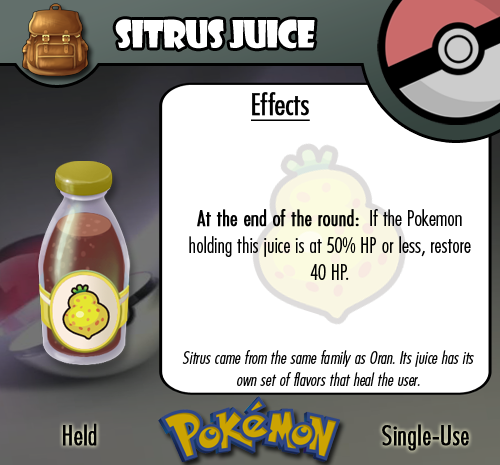
<style>
.page{position:relative;width:500px;height:465px;background:#ffffff}
.page>*{position:absolute;margin:0}
.t1{font:36.7px "ShowcardGothic-Reg";letter-spacing:-0.025em;color:#ffffff;scale:0.91 1}
.t2{font:22.2px "FuturaCondensedBQ-Light";color:#010101}
.t3{font:27.8px "FuturaCondensedBQ-Light";color:#010101;font-weight:bold}
.t4{font:30.6px "FuturaCondensedBQ-Light";color:#010101;font-weight:bold;text-decoration:underline}
.t5{font:22.2px "FuturaCondensedBQ-Light";color:#010101;font-weight:bold}
.t6{font:18.1px "FuturaCondensedBQ-Light";color:#010101;font-style:italic}
</style>
<div class="page">
<p class="t1" style="left:115px;top:19px;width:200px;height:31px">Sitrus Juice</p>
<p class="t2" style="left:189px;top:92px;width:282px;height:188px"><span class="t3">  </span><span class="t4">Effects<br><br><br><br><br><br></span><span class="t5">At the end of the round:</span>  If the Pokemon holding this juice is at 50% HP or less, restore 40 HP.</p>
<p class="t6" style="left:182px;top:350px;width:292px;height:36px;text-align:center">Sitrus came from the same family as Oran. Its juice has its own set of flavors that heal the user.</p>
<p class="t3" style="left:63px;top:423px;width:34px;height:23px">Held</p>
<p class="t3" style="left:382px;top:424px;width:87px;height:27px">Single-Use</p>
</div>
